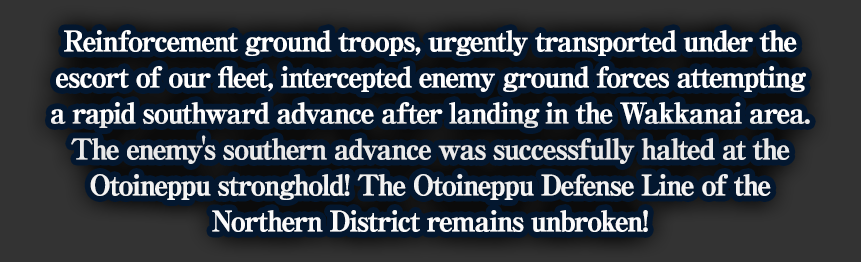
<style>
.page{position:relative;width:861px;height:262px;background:#03172f}
.page>*{position:absolute;margin:0}
.t1{font:28px/36px "RyuminPro-ExBold";letter-spacing:-0.08em;color:#ffffff;font-weight:bold}
</style>
<div class="page">
<p class="t1" style="left:51px;top:30px;width:759px;height:202px;text-align:center">Reinforcement ground troops, urgently transported under the<br>escort of our fleet, intercepted enemy ground forces attempting<br>a rapid southward advance after landing in the Wakkanai area.<br>The enemy's southern advance was successfully halted at the<br>Otoineppu stronghold! The Otoineppu Defense Line of the<br>Northern District remains unbroken!</p>
</div>
